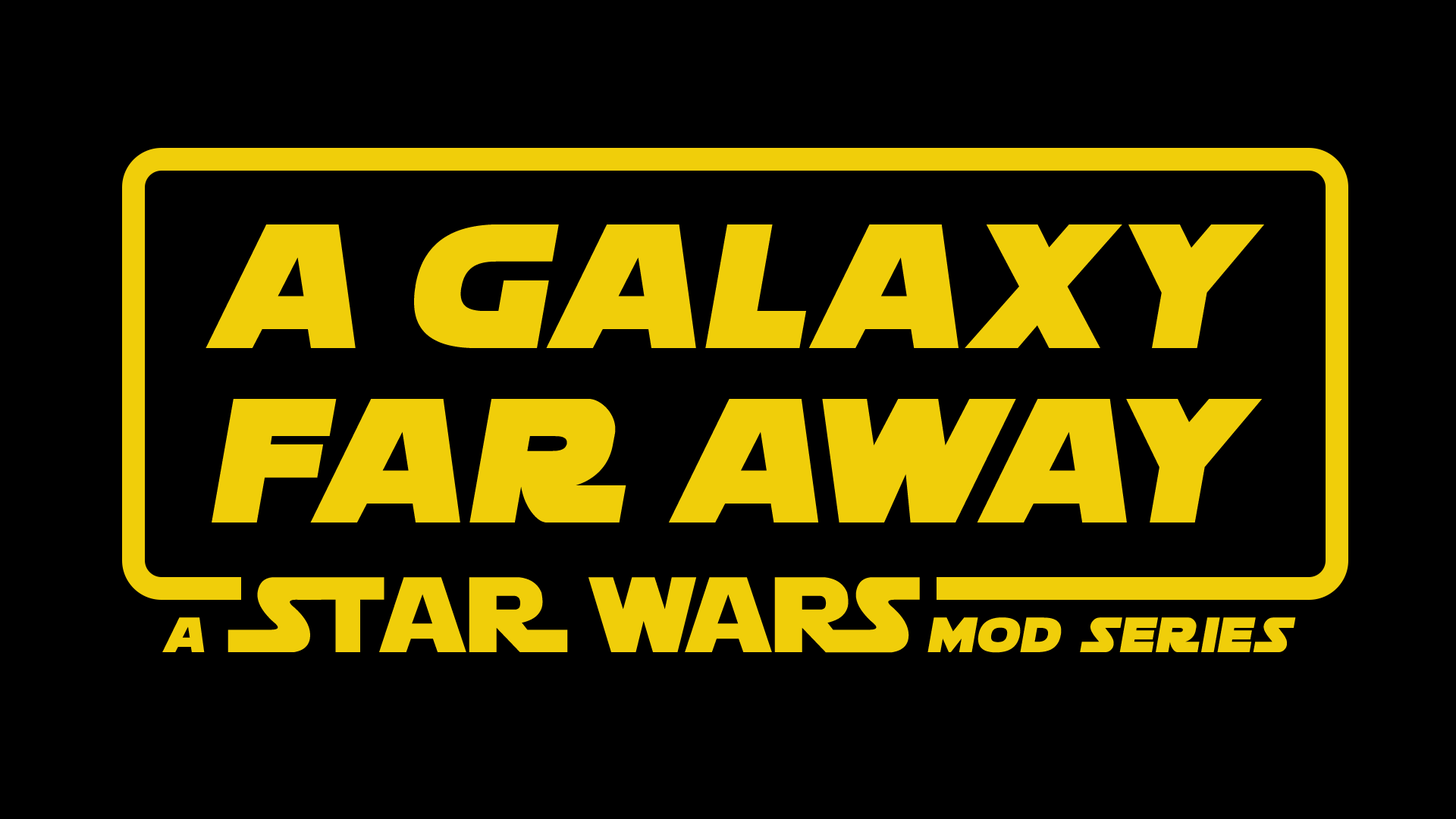
<style>
.page{position:relative;width:1456px;height:819px;background:#000000}
.page>*{position:absolute;margin:0}
.t1{font:189.6px/174.4px "Soloist";color:#f0ce0a}
.t2{font:106.2px "StarJedi";color:#f0ce0a}
.t3{font:106.2px "StarJedi";letter-spacing:0.04em;color:#f0ce0a}
.t4{font:53.1px "Soloist";color:#f0ce0a}
</style>
<div class="page">
<p class="t1" style="left:206px;top:224px;width:1058px;height:298px;text-align:center">a galaxy<br>far away</p>
<p class="t2" style="left:227px;top:577px;width:693px;height:76px">St<span class="t3">a</span>R w<span class="t3">a</span>rS</p>
<p class="t4" style="left:162px;top:617px;width:1134px;height:36px">a                           mod series</p>
</div>
